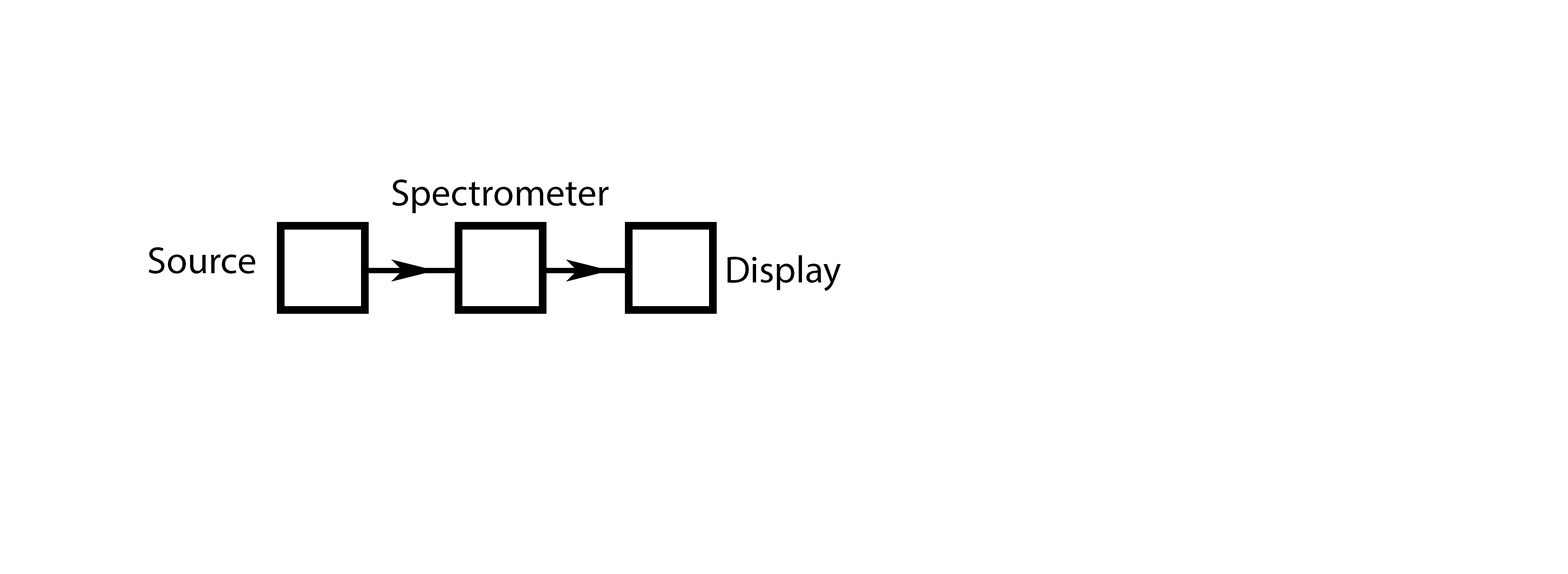
<style>
.page{position:relative;width:1568px;height:574px;background:#ffffff}
.page>*{position:absolute;margin:0}
.t1{font:38.2px "MyriadPro-Regular";color:#000000}
</style>
<div class="page">
<p class="t1" style="left:392px;top:179px;width:217px;height:34px">Spectrometer</p>
<p class="t1" style="left:148px;top:247px;width:107px;height:26px">Source</p>
<p class="t1" style="left:727px;top:255px;width:114px;height:36px">Display</p>
</div>
